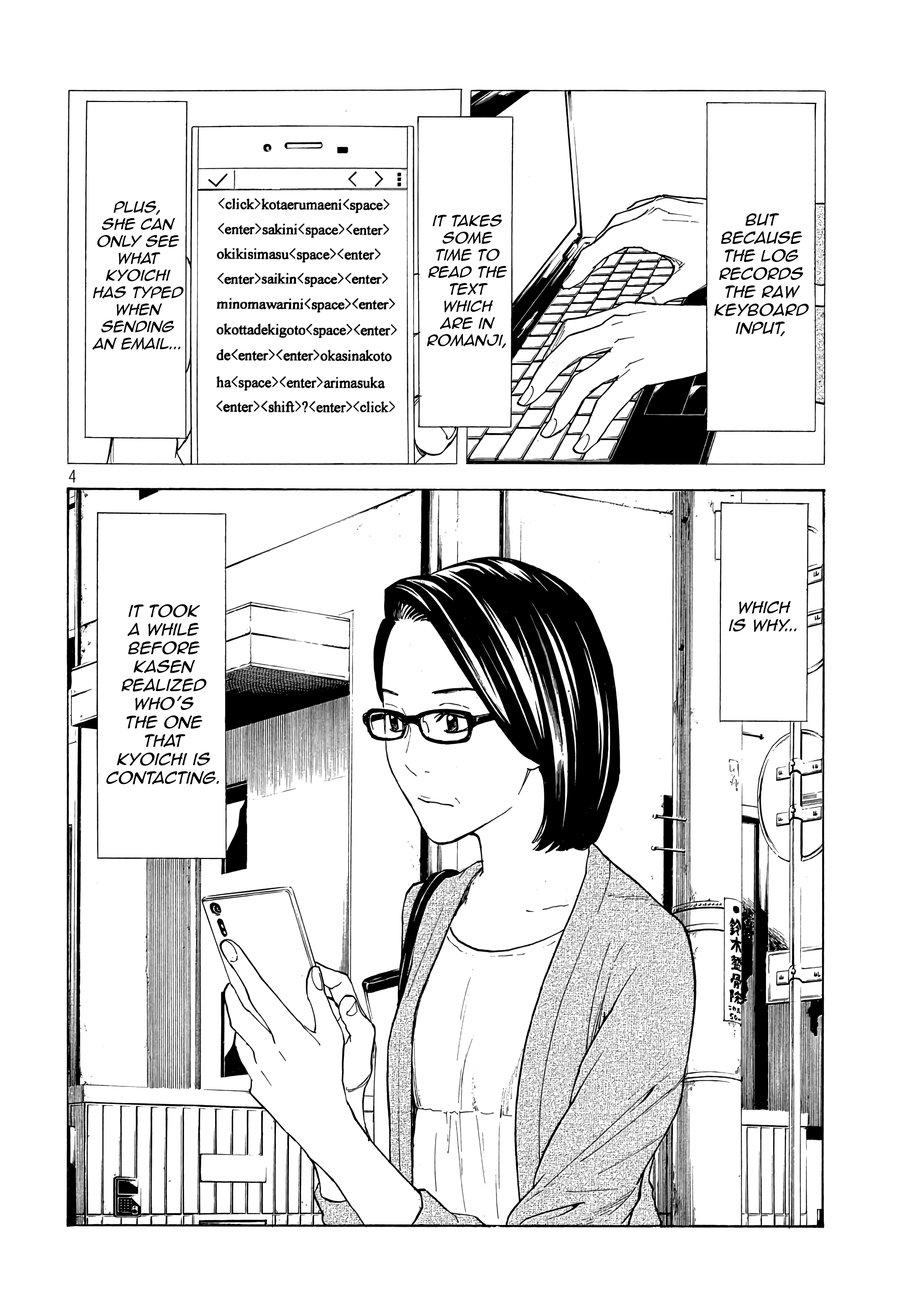
<style>
.page{position:relative;width:916px;height:1301px;background:#ffffff}
.page>*{position:absolute;margin:0}
.t1{font:14.2px "AnimeAce2.0BB-Italic";color:#000000}
.t2{font:15px "AnimeAce2.0BB-Italic";color:#000000}
.t3{font:15.5px "AnimeAce2.0BB-Italic";color:#000000}
</style>
<div class="page">
<p class="t1" style="left:92px;top:201px;width:92px;height:149px;text-align:center">Plus,<br>she can only see what <br>kyoichi has typed when sending an email...</p>
<p class="t1" style="left:427px;top:214px;width:80px;height:134px;text-align:center">it takes some time to read the  text which are in<br>romanji,</p>
<p class="t2" style="left:714px;top:213px;width:95px;height:123px;text-align:center">But <br>because the log records the raw keyboard input,</p>
<p class="t3" style="left:106px;top:604px;width:113px;height:181px;text-align:center">it took <br>a while before Kasen <br>realized who’s <br>the one that  <br>kyoichi is contacting.</p>
<p class="t2" style="left:729px;top:601px;width:68px;height:31px;text-align:center">which <br>is why...</p>
</div>
